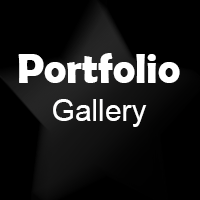
<style>
.page{position:relative;width:200px;height:200px;background:#000000}
.page>*{position:absolute;margin:0}
.t1{font:42px "BerlinSansFBDemi-Bold";color:#ffffff}
.t2{font:30px "ArialMT";color:#ffffff}
</style>
<div class="page">
<p class="t1" style="left:18px;top:53px;width:162px;height:30px">Portfolio</p>
<p class="t2" style="left:53px;top:99px;width:94px;height:28px">Gallery</p>
</div>
